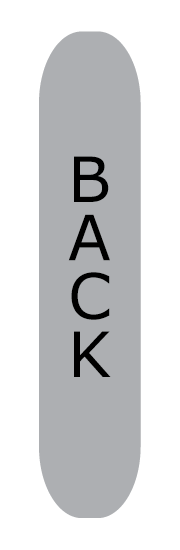
<style>
.page{position:relative;width:180px;height:550px;background:#ffffff}
.page>*{position:absolute;margin:0}
.t1{font:62.5px/58.3px "Verdana";color:#000000}
</style>
<div class="page">
<p class="t1" style="left:68px;top:156px;width:43px;height:221px">B<br>A<br>C<br>K</p>
</div>
